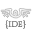
<style>
.page{position:relative;width:32px;height:32px;background:#ffffff}
.page>*{position:absolute;margin:0}
.t1{font:9.3px "AdobeDevanagari-Regular";color:#808080}
.t2{font:10.7px "AdobeDevanagari-Regular";color:#808080}
</style>
<div class="page">
<p class="t1" style="left:5px;top:20px;width:21px;height:9px"><span class="t2">{</span>IDE<span class="t2">}</span></p>
</div>
